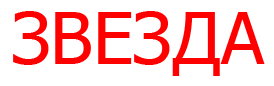
<style>
.page{position:relative;width:274px;height:86px;background:#ffffff}
.page>*{position:absolute;margin:0}
.t1{font:72px "Tahoma";color:#ff0000}
</style>
<div class="page">
<p class="t1" style="left:13px;top:11px;width:252px;height:65px">ЗВЕЗДА</p>
</div>
